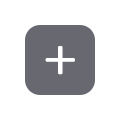
<style>
.page{position:relative;width:120px;height:120px;background:#ffffff}
.page>*{position:absolute;margin:0}
.t1{font:40px "HiraMaruPro-W4";color:#ffffff;font-weight:bold}
</style>
<div class="page">
<p class="t1" style="left:45px;top:46px;width:30px;height:29px">＋</p>
</div>
